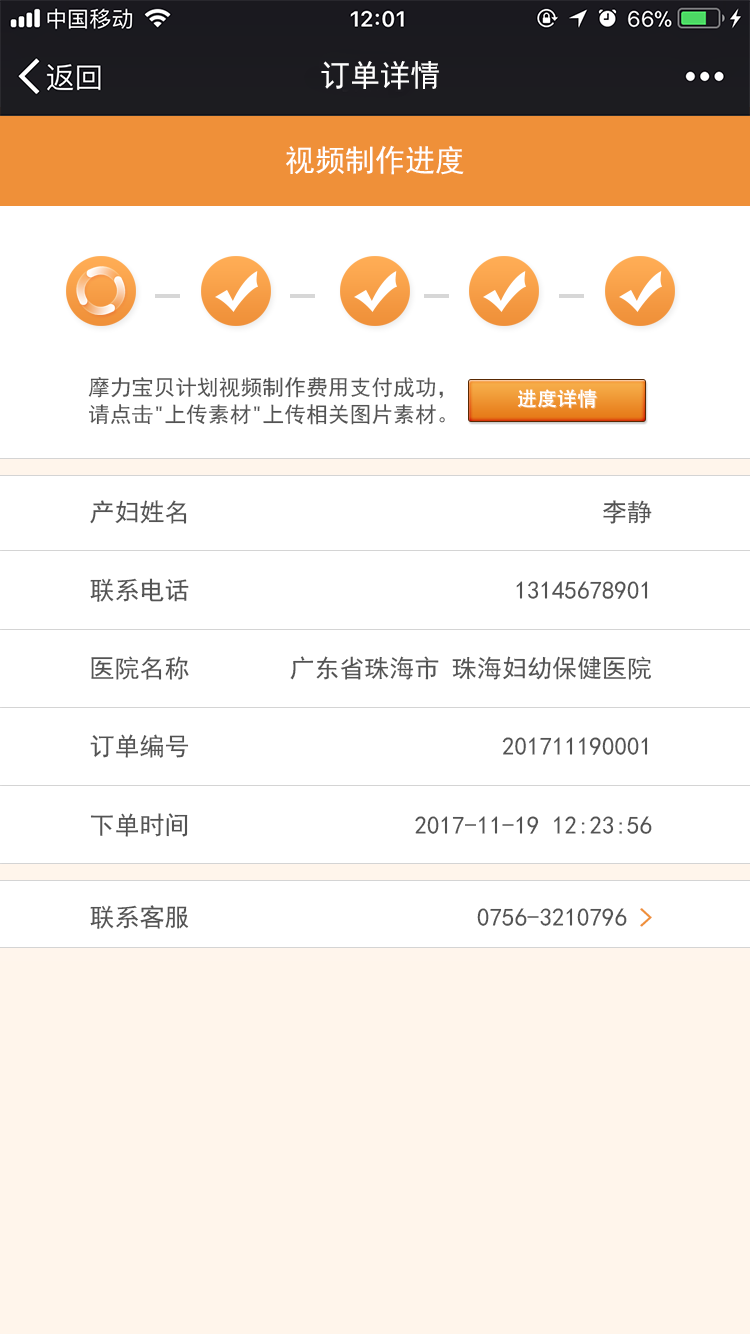
<style>
.page{position:relative;width:750px;height:1334px;background:#ffffff}
.page>*{position:absolute;margin:0}
.t1{font:30.5px "SimHei";color:#ffffff}
.t2{font:21.7px/27.1px "SimHei";color:#535353}
.t3{font:19.8px "AdobeHeitiStd-Regular";color:#ffffff}
.t4{font:25px "SimHei";color:#535353}
.t5{font:25px "SimHei";color:#ef9039;font-weight:bold}
</style>
<div class="page">
<p class="t1" style="left:321px;top:61px;width:118px;height:29px">订单详情</p>
<p class="t1" style="left:286px;top:145px;width:178px;height:30px">视频制作进度</p>
<p class="t2" style="left:88px;top:377px;width:357px;height:48px">摩力宝贝计划视频制作费用支付成功，<br>请点击"上传素材"上传相关图片素材。</p>
<p class="t3" style="left:517px;top:389px;width:80px;height:19px">进度详情</p>
<p class="t4" style="left:90px;top:500px;width:562px;height:24px">产妇姓名                                 李静</p>
<p class="t4" style="left:90px;top:578px;width:558px;height:24px">联系电话                          13145678901</p>
<p class="t4" style="left:91px;top:656px;width:560px;height:24px">医院名称        广东省珠海市 珠海妇幼保健医院</p>
<p class="t4" style="left:90px;top:734px;width:558px;height:24px">订单编号                         201711190001</p>
<p class="t4" style="left:90px;top:813px;width:562px;height:24px">下单时间                  2017-11-19 12:23:56</p>
<p class="t4" style="left:90px;top:905px;width:562px;height:24px">联系客服                       0756-3210796 <span class="t5">&gt;</span></p>
</div>
